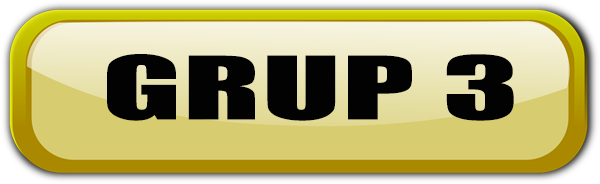
<style>
.page{position:relative;width:600px;height:184px}
.page>*{position:absolute;margin:0}
.t1{font:80.7px "Impact";letter-spacing:0.01em;color:#020202;scale:1.78 1}
</style>
<div class="page">
<p class="t1" style="left:106px;top:54px;width:408px;height:67px">GRUP 3</p>
</div>
